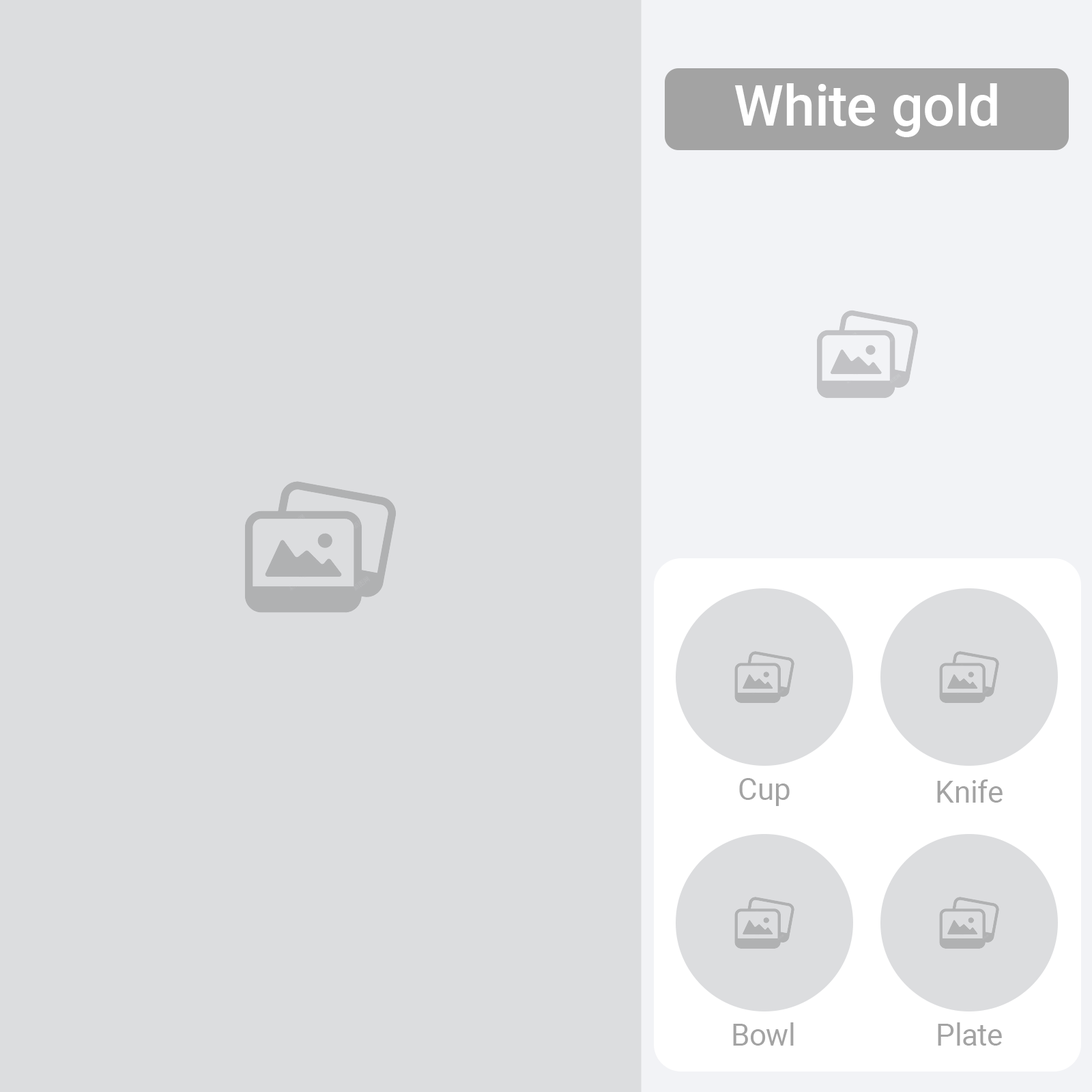
<style>
.page{position:relative;width:1092px;height:1092px;background:#dcdddf}
.page>*{position:absolute;margin:0}
.t1{font:56.8px "Roboto-Medium";color:#ffffff}
.t2{font:30px "Roboto-Regular";color:#a3a3a3}
</style>
<div class="page">
<p class="t1" style="left:735px;top:83px;width:262px;height:54px">White gold</p>
<p class="t2" style="left:739px;top:778px;width:51px;height:28px">Cup</p>
<p class="t2" style="left:937px;top:779px;width:66px;height:24px">Knife</p>
<p class="t2" style="left:733px;top:1022px;width:61px;height:24px">Bowl</p>
<p class="t2" style="left:938px;top:1022px;width:64px;height:24px">Plate</p>
</div>
